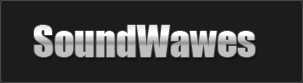
<style>
.page{position:relative;width:303px;height:83px;background:#1c1c1c}
.page>*{position:absolute;margin:0}
.t1{font:40px "Impact"}
</style>
<div class="page">
<p class="t1" style="left:34px;top:25px;width:222px;height:32px">SoundWawes</p>
</div>
